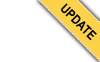
<style>
.page{position:relative;width:100px;height:62px;background:#ffffff}
.page>*{position:absolute;margin:0}
.t1{font:12.6px "Arial-BoldMT";color:#000000;font-variant:small-caps;scale:0.87 1}
</style>
<div class="page">
<p class="t1" style="left:61px;top:3px;width:36px;height:38px;rotate:45deg">UPDATE</p>
</div>
